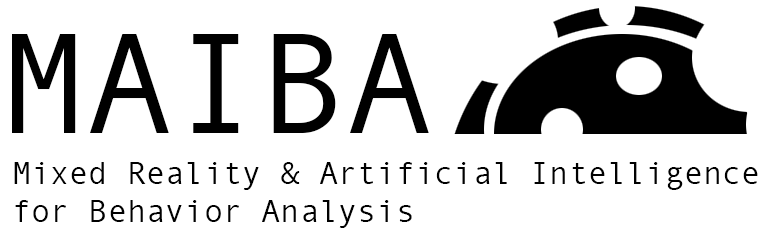
<style>
.page{position:relative;width:780px;height:233px;background:#ffffff}
.page>*{position:absolute;margin:0}
.t1{font:144px "AndaleMono";color:#000000}
.t2{font:32px "AndaleMono";color:#000000}
</style>
<div class="page">
<p class="t1" style="left:12px;top:34px;width:417px;height:99px">MAIBA</p>
<p class="t2" style="left:14px;top:162px;width:744px;height:66px">Mixed Reality &amp; Artificial Intelligence<br>for Behavior Analysis</p>
</div>
